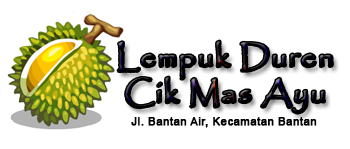
<style>
.page{position:relative;width:350px;height:149px;background:#ffffff}
.page>*{position:absolute;margin:0}
.t1{font:30px "Papyrus-Regular";letter-spacing:0.035em;font-weight:bold}
.t2{font:11px "ArialMT";letter-spacing:0.035em;color:#000000;font-weight:bold}
</style>
<div class="page">
<p class="t1" style="left:118px;top:41px;width:215px;height:72px;text-align:center">Lempuk Duren<br>Cik Mas Ayu</p>
<p class="t2" style="left:131px;top:117px;width:186px;height:11px">Jl. Bantan Air, Kecamatan Bantan</p>
</div>
